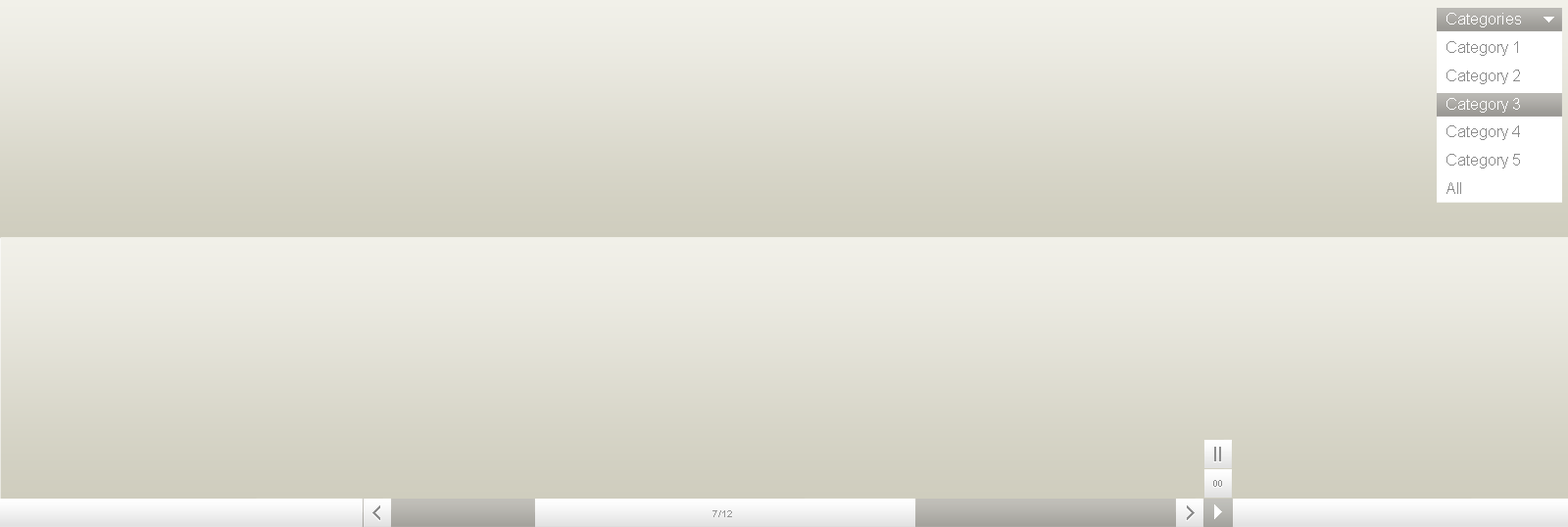
<style>
.page{position:relative;width:1568px;height:527px}
.page>*{position:absolute;margin:0}
.t1{font:15.7px/28.2px "ArialMT";color:#8b8b8b}
.t2{font:15.7px/28.2px "ArialMT";color:#ffffff}
.t3{font:9.8px "ArialNarrow";color:#8b8b8b;text-transform:uppercase}
.t4{font:9.8px "ArialMT";color:#959595;text-transform:uppercase}
</style>
<div class="page">
<p class="t1" style="left:1446px;top:13px;width:75px;height:181px;text-align:justify"><span class="t2">Categories<br></span>Category 1<br>Category 2<br><span class="t2">Category 3<br></span>Category 4<br>Category 5<br>All</p>
<p class="t3" style="left:1213px;top:480px;width:9px;height:7px">00</p>
<p class="t4" style="left:712px;top:511px;width:20px;height:6px">7/12</p>
</div>
